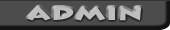
<style>
.page{position:relative;width:170px;height:30px;background:#4c4c4c}
.page>*{position:absolute;margin:0}
.t1{font:18px "Lithograph-Bold";color:#bebebe;scale:1.56 1}
</style>
<div class="page">
<p class="t1" style="left:27px;top:6px;width:114px;height:15px">Admin</p>
</div>
